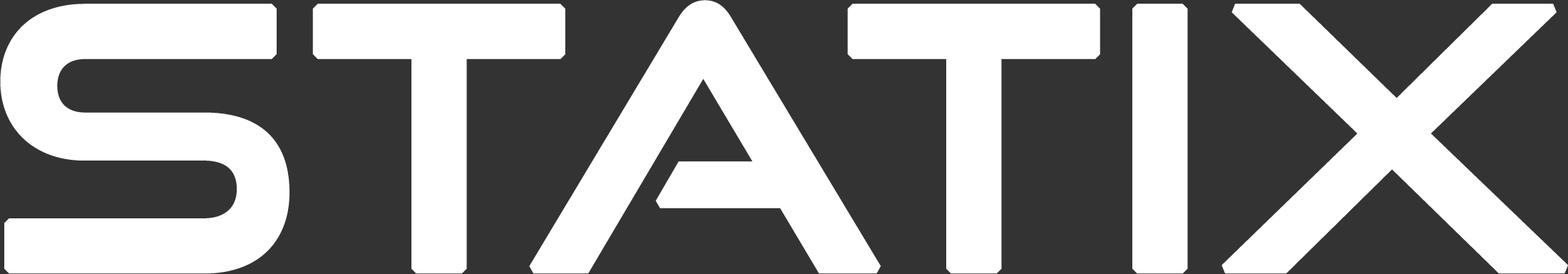
<style>
.page{position:relative;width:1568px;height:274px;background:#333333}
.page>*{position:absolute;margin:0}
.t1{font:357.2px "GoodTimesRg-Regular";color:#ffffff;font-weight:bold}
</style>
<div class="page">
<p class="t1" style="left:0px;top:0px;width:1568px;height:274px">STATIX</p>
</div>
